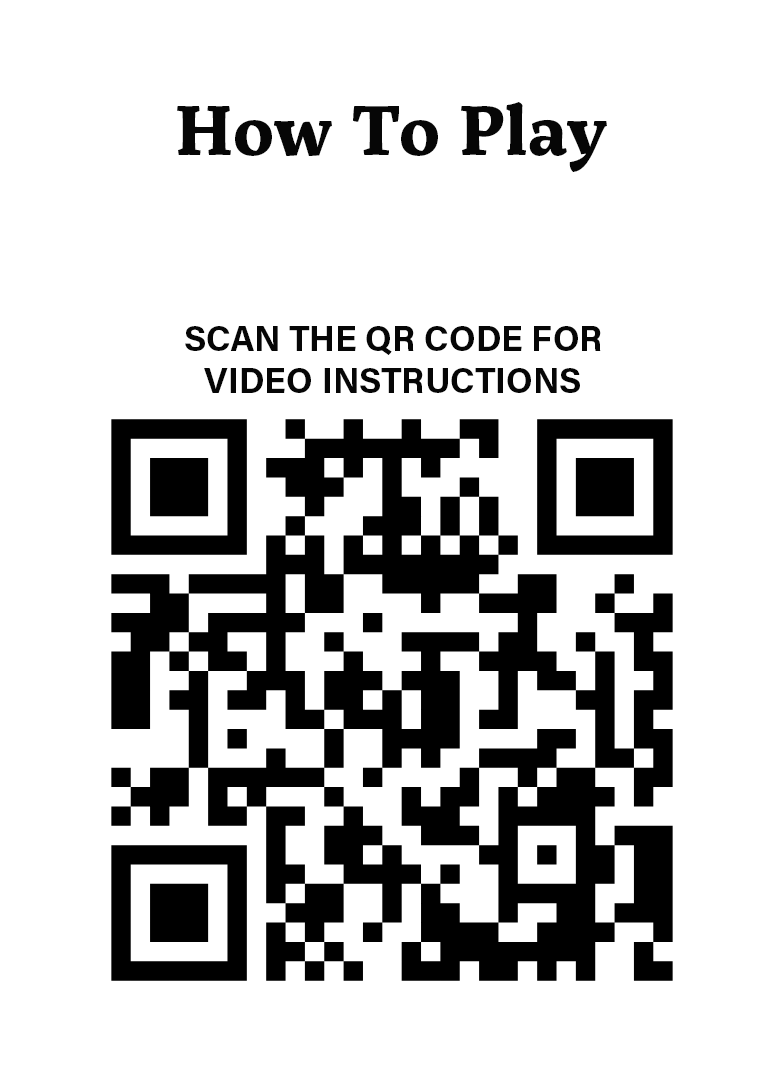
<style>
.page{position:relative;width:784px;height:1066px;background:#ffffff}
.page>*{position:absolute;margin:0}
.t1{font:70px "ServusSlab-Bold";color:#060606}
.t2{font:35px "AcuminPro-Bold";color:#060606}
</style>
<div class="page">
<p class="t1" style="left:177px;top:102px;width:430px;height:70px">How To Play</p>
<p class="t2" style="left:185px;top:326px;width:416px;height:67px;text-align:center">SCAN THE QR CODE FOR <br>VIDEO INSTRUCTIONS</p>
</div>
